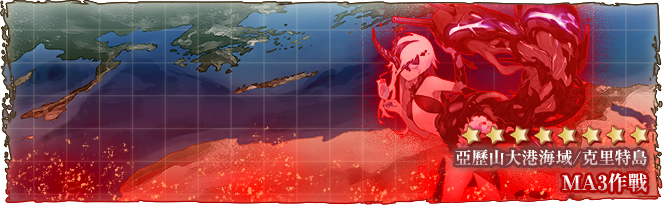
<style>
.page{position:relative;width:663px;height:205px}
.page>*{position:absolute;margin:0}
.t1{font:17px "RyuminPro-ExBold"}
.t2{font:20px "RyuminPr6N-ExBold"}
</style>
<div class="page">
<p class="t1" style="left:455px;top:149px;width:192px;height:17px">亞歷山大港海域/克里特島</p>
<p class="t2" style="left:562px;top:173px;width:85px;height:19px">MA3作戰</p>
</div>
